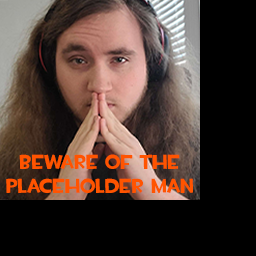
<style>
.page{position:relative;width:256px;height:256px;background:#000000}
.page>*{position:absolute;margin:0}
.t1{font:20.1px "TF2Build";color:#ff5400}
</style>
<div class="page">
<p class="t1" style="left:6px;top:154px;width:187px;height:39px;text-align:center">Beware of the<br>placeholder man</p>
</div>
